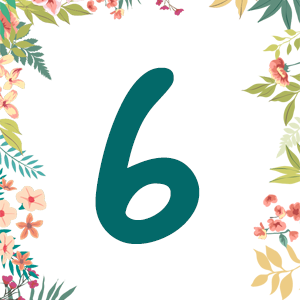
<style>
.page{position:relative;width:300px;height:300px;background:#ffffff}
.page>*{position:absolute;margin:0}
.t1{font:305.6px "BookAkhanake";color:#036969}
</style>
<div class="page">
<p class="t1" style="left:95px;top:67px;width:105px;height:177px">6</p>
</div>
